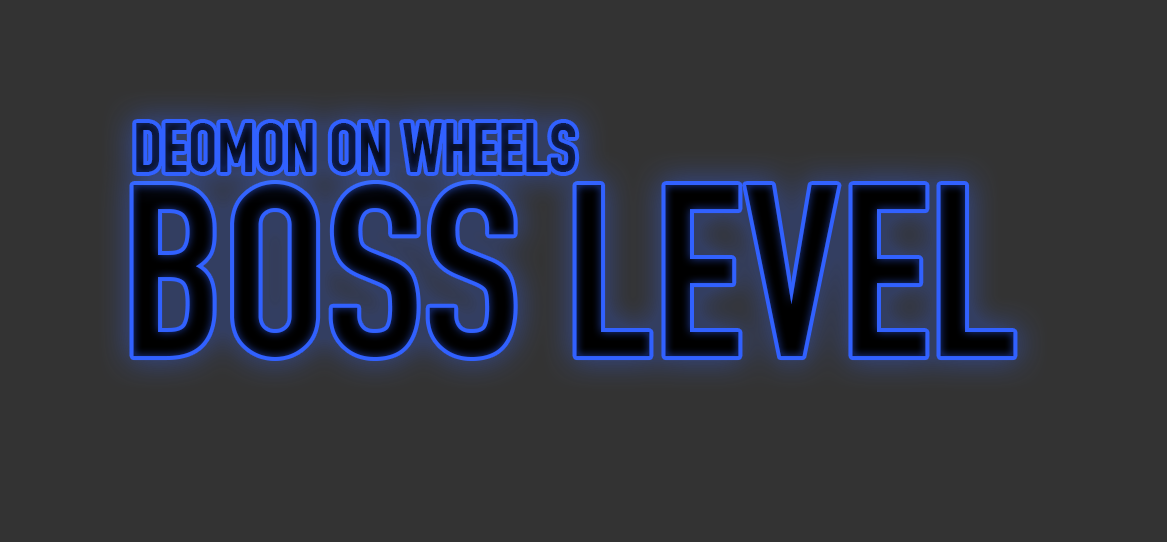
<style>
.page{position:relative;width:1167px;height:542px;background:#333333}
.page>*{position:absolute;margin:0}
.t1{font:69.1px "DINEngschrift";color:#0c1840}
.t2{font:240px "DINEngschrift";color:#02050c}
</style>
<div class="page">
<p class="t1" style="left:136px;top:123px;width:440px;height:49px">DEOMON ON WHEELS</p>
<p class="t2" style="left:133px;top:184px;width:881px;height:173px">BOSS LEVEL</p>
</div>
